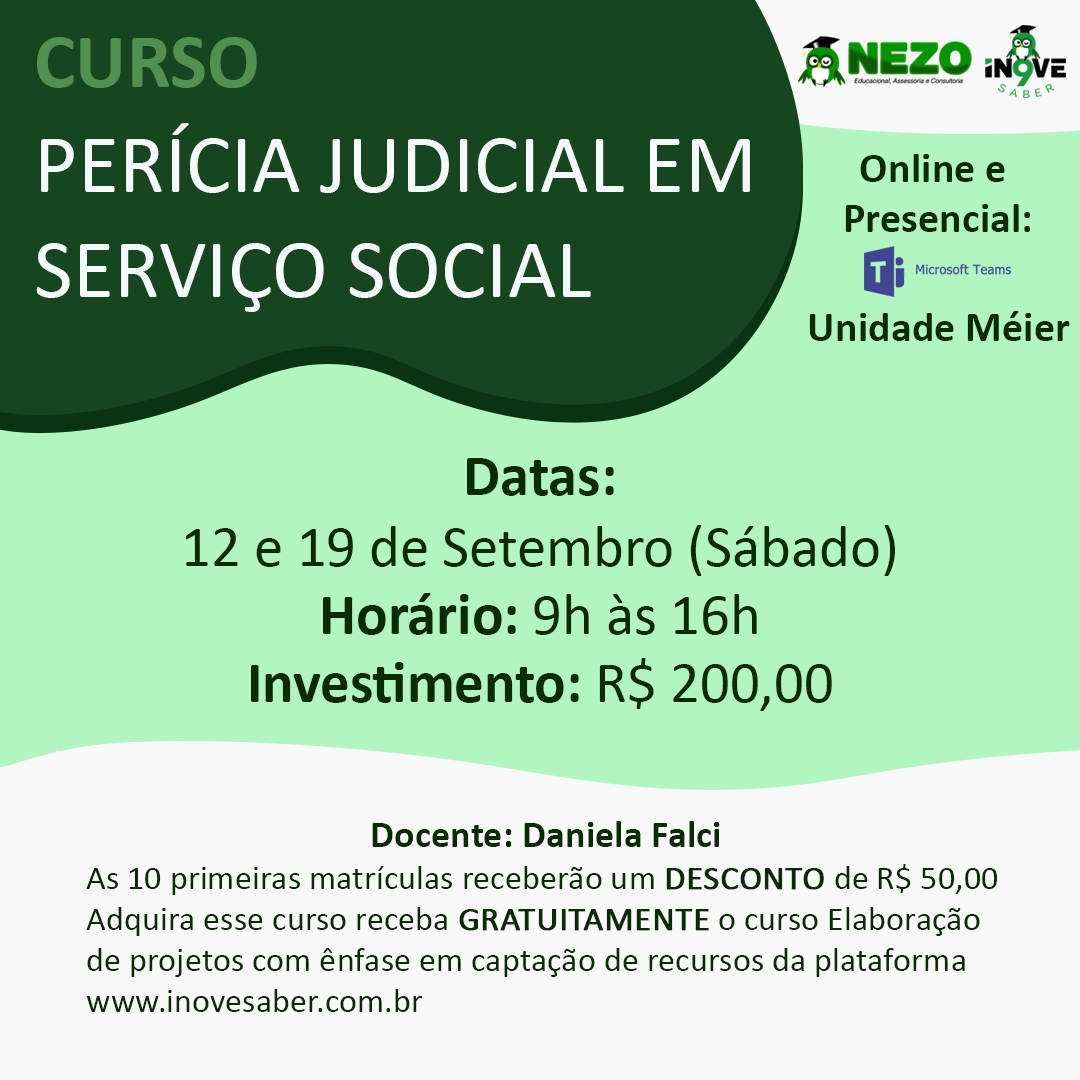
<style>
.page{position:relative;width:1080px;height:1080px;background:#b2f5c0}
.page>*{position:absolute;margin:0}
.t1{font:84.3px/105px "Calibri";color:#f4faf9}
.t2{font:78.3px "Calibri-Bold";color:#529050}
.t3{font:42.3px/50px "Calibri-Bold";color:#0a2b05}
.t4{font:42.3px "Calibri-Bold";color:#0a2b05}
.t5{font:58.6px "Calibri";color:#0a2b05}
.t6{font:58.6px/79.3px "Calibri-Bold";color:#0a2b05}
.t7{font:58.6px/68.3px "Calibri-Bold";color:#0a2b05}
.t8{font:58.6px/68.3px "Calibri";color:#0a2b05}
.t9{font:34.3px "Calibri";color:#0a2b05}
.t10{font:38.3px/50px "Calibri-Bold";color:#0a2b05}
.t11{font:34.3px "Calibri";color:#0a2b05;font-weight:bold}
</style>
<div class="page">
<p class="t1" style="left:36px;top:37px;width:714px;height:275px"><span class="t2">CURSO<br></span>PERÍCIA JUDICIAL EM SERVIÇO SOCIAL</p>
<p class="t3" style="left:845px;top:154px;width:185px;height:78px;text-align:center">Online e <br>Presencial:</p>
<p class="t4" style="left:809px;top:311px;width:261px;height:30px">Unidade Méier</p>
<p class="t5" style="left:186px;top:458px;width:709px;height:253px;text-align:center"><span class="t6">Datas: <br></span>12 e 19 de Setembro (Sábado)<br><span class="t7">Horário:</span><span class="t8"> 9h às 16h<br></span><span class="t7">Investimento:</span><span class="t8"> R$ 200,00</span></p>
<p class="t9" style="left:86px;top:821px;width:912px;height:191px;text-align:center"><span class="t10">Docente: Daniela Falci<br></span>As 10 primeiras matrículas receberão um <span class="t11">DESCONTO</span> de R$ 50,00<br>Adquira esse curso receba <span class="t11">GRATUITAMENTE</span> o curso Elaboração de projetos com ênfase em captação de recursos da plataforma www.inovesaber.com.br</p>
</div>
